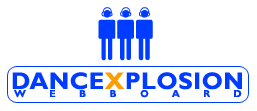
<style>
.page{position:relative;width:257px;height:111px;background:#ffffff}
.page>*{position:absolute;margin:0}
.t1{font:72px "SuperstarDJ";color:#003cff}
.t2{font:24px "GillSansMT-Bold";letter-spacing:0.025em;color:#003cff}
.t3{font:24px "GillSansMT-Bold";letter-spacing:0.025em;color:#ff9c00}
.t4{font:10px "GillSansMT-Bold";letter-spacing:2.35em;color:#003cff}
</style>
<div class="page">
<p class="t1" style="left:98px;top:7px;width:55px;height:54px">I</p>
<p class="t2" style="left:12px;top:72px;width:230px;height:18px">DANCE<span class="t3">X</span>PLOSION</p>
<p class="t4" style="left:14px;top:90px;width:228px;height:8px">WEBBOARD</p>
</div>
